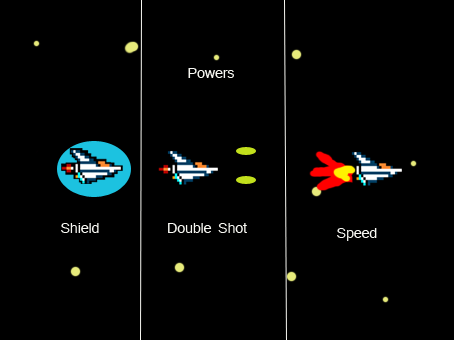
<style>
.page{position:relative;width:454px;height:340px;background:#000000}
.page>*{position:absolute;margin:0}
.t1{font:14px "Mangal";letter-spacing:-0.02em;color:#f7f7f2}
</style>
<div class="page">
<p class="t1" style="left:188px;top:68px;width:46px;height:10px">Powers</p>
<p class="t1" style="left:61px;top:223px;width:38px;height:10px">Shield</p>
<p class="t1" style="left:168px;top:223px;width:79px;height:10px">Double Shot</p>
<p class="t1" style="left:337px;top:228px;width:40px;height:13px">Speed</p>
</div>
